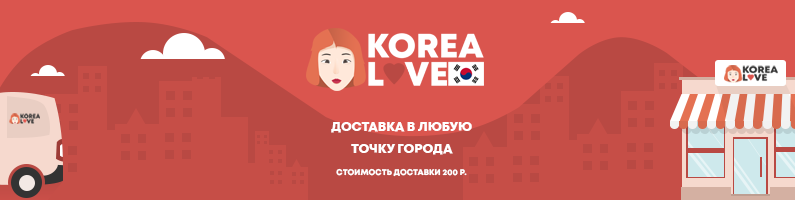
<style>
.page{position:relative;width:795px;height:200px;background:#da554e}
.page>*{position:absolute;margin:0}
.t1{font:12.8px/21.9px "Mont-HeavyDEMO";color:#ffffff}
.t2{font:8.2px/21.9px "Mont-HeavyDEMO";color:#ffffff}
</style>
<div class="page">
<p class="t1" style="left:331px;top:122px;width:141px;height:55px;text-align:center">ДОСТАВКА В ЛЮБУЮ<br>ТОЧКУ ГОРОДА<br><span class="t2">СТОИМОСТЬ ДОСТАВКИ 200 Р.</span></p>
</div>
